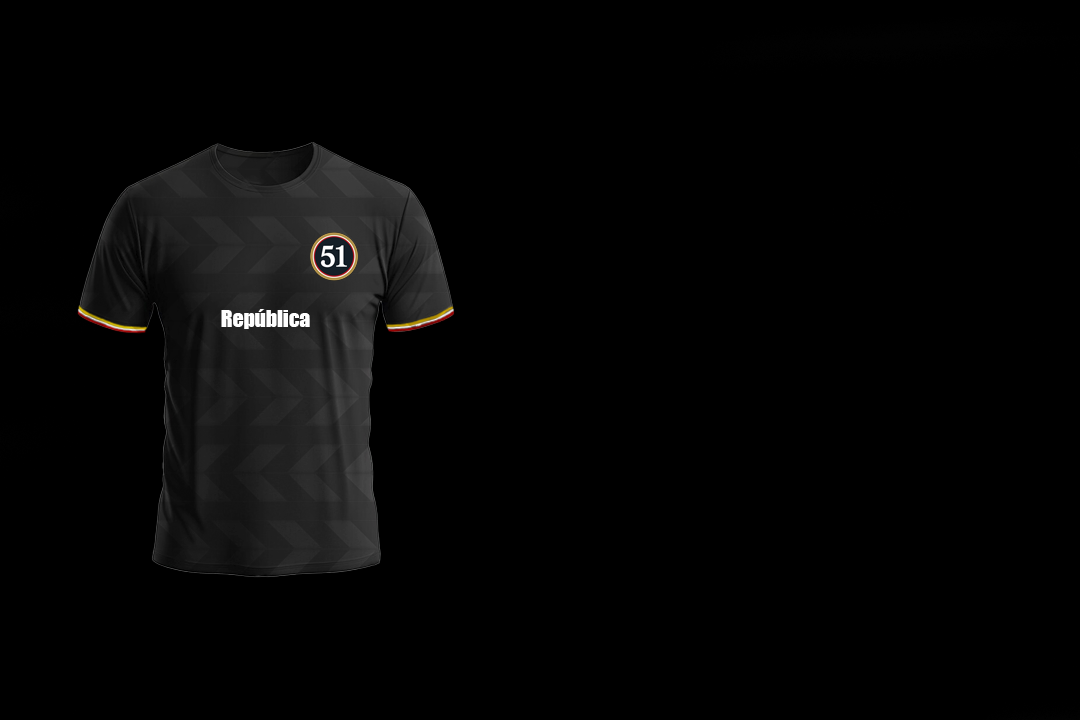
<style>
.page{position:relative;width:1080px;height:720px;background:#000000}
.page>*{position:absolute;margin:0}
.t1{font:21.5px "Impact";color:#ffffff}
</style>
<div class="page">
<p class="t1" style="left:221px;top:309px;width:89px;height:20px">República</p>
</div>
